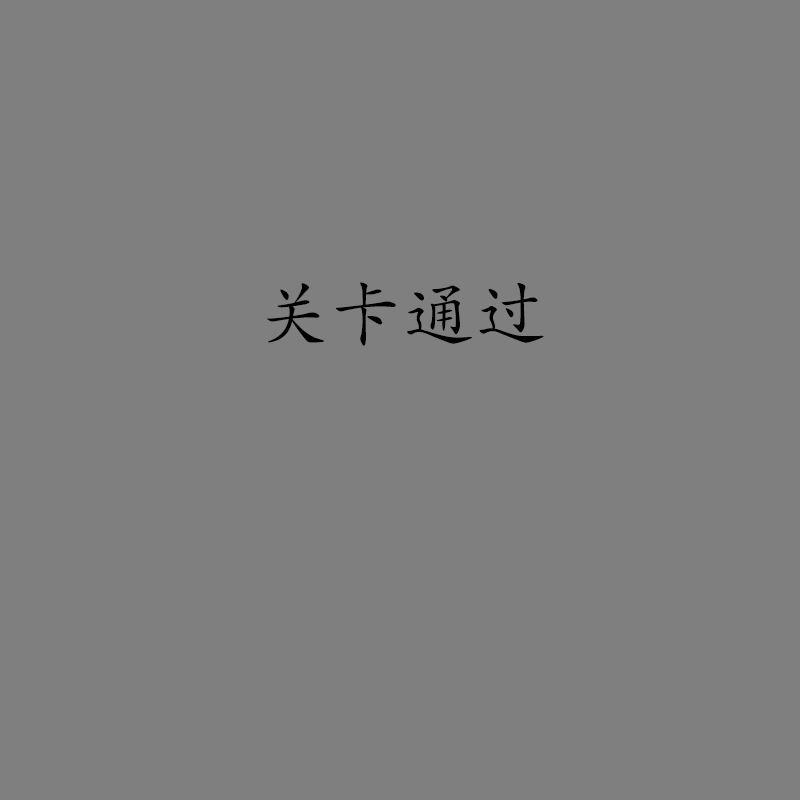
<style>
.page{position:relative;width:800px;height:800px;background:#7f7f7f}
.page>*{position:absolute;margin:0}
.t1{font:72px "STKaiti";color:#000000;text-transform:uppercase}
</style>
<div class="page">
<p class="t1" style="left:267px;top:282px;width:277px;height:64px">关卡通过</p>
</div>
